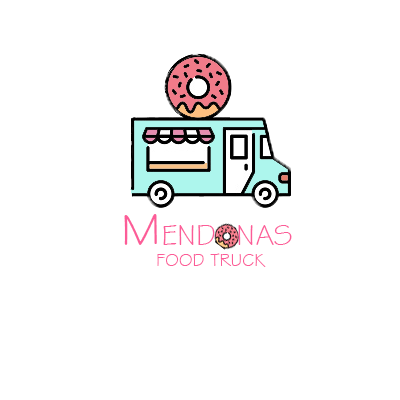
<style>
.page{position:relative;width:400px;height:400px;background:#ffffff}
.page>*{position:absolute;margin:0}
.t1{font:30px "StylusBT";color:#fc5c98;text-transform:uppercase}
.t2{font:48px "StylusBT";color:#fc5c98;text-transform:uppercase}
.t3{font:18px "StylusBT";color:#fc5c98;text-transform:uppercase}
</style>
<div class="page">
<p class="t1" style="left:124px;top:214px;width:168px;height:31px"><span class="t2">M</span>end  nas</p>
<p class="t3" style="left:157px;top:253px;width:109px;height:14px">Food truck</p>
</div>
